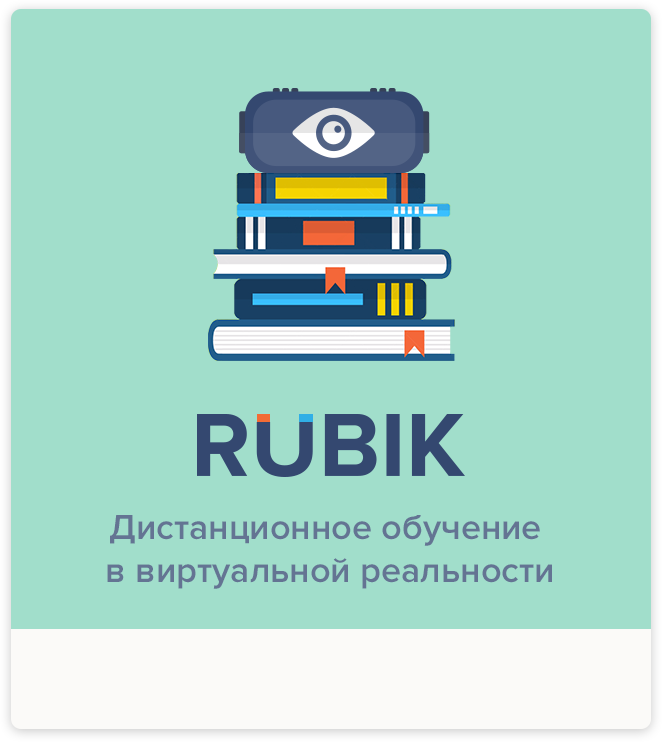
<style>
.page{position:relative;width:662px;height:742px;background:#a1decb}
.page>*{position:absolute;margin:0}
.t1{font:36px "ProximaNova-Semibold";color:#647493}
</style>
<div class="page">
<p class="t1" style="left:107px;top:515px;width:445px;height:74px;text-align:center">Дистанционное обучение <br>в виртуальной реальности</p>
</div>
